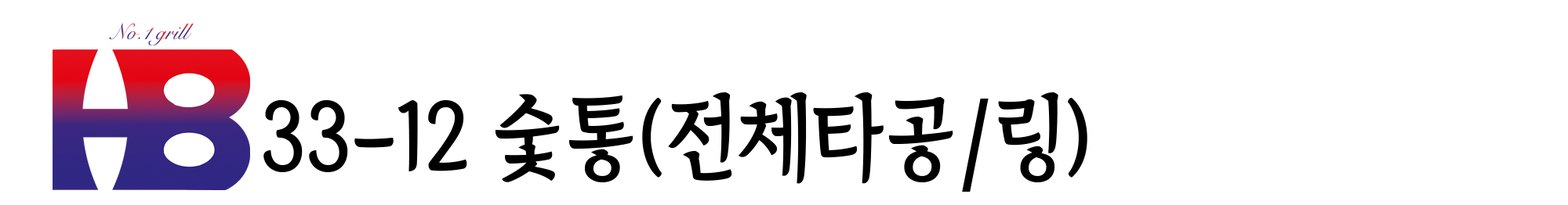
<style>
.page{position:relative;width:1568px;height:205px;background:#ffffff}
.page>*{position:absolute;margin:0}
.t1{font:94.1px "TheIndependenceHallofKorea-Regular";color:#000000;scale:0.89 1}
.t2{font:93.7px "TheIndependenceHallofKorea-Regular";color:#000000;scale:0.89 1}
</style>
<div class="page">
<p class="t1" style="left:263px;top:93px;width:824px;height:99px"><span class="t2">33-12 </span>숯통(전체타공/링)</p>
</div>
